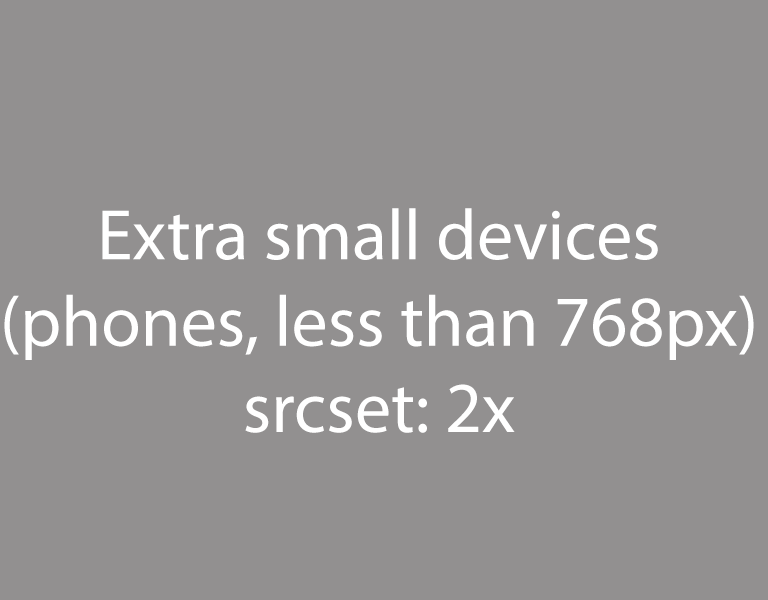
<style>
.page{position:relative;width:768px;height:600px;background:#929090}
.page>*{position:absolute;margin:0}
.t1{font:72px "MyriadPro-Regular";color:#ffffff}
</style>
<div class="page">
<p class="t1" style="left:4px;top:208px;width:750px;height:225px">Extra small devices (phones, less than 768px)<br>srcset: 2x</p>
</div>
